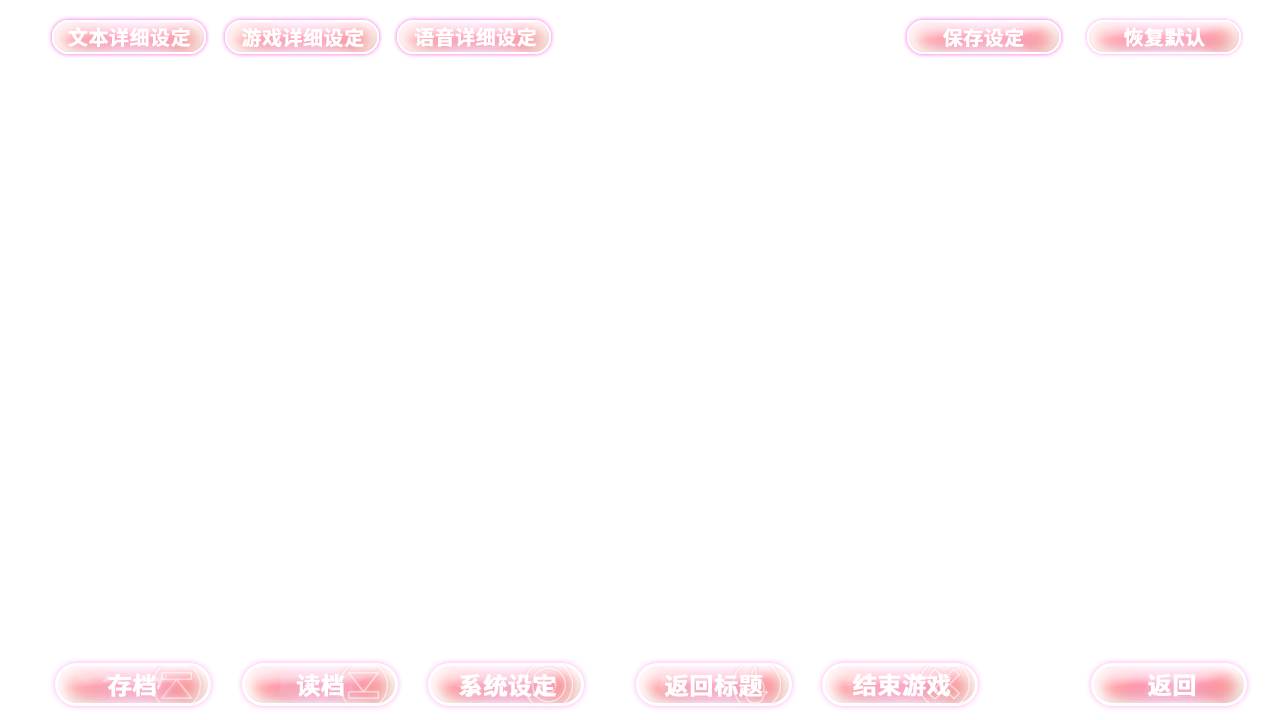
<style>
.page{position:relative;width:1280px;height:720px;background:#ffffff}
.page>*{position:absolute;margin:0}
.t1{font:20px "SourceHanSansSC-Bold";color:#ffffff;font-weight:bold}
.t2{font:24px "SourceHanSansSC-Bold";color:#ffffff;font-weight:bold}
</style>
<div class="page">
<p class="t1" style="left:68px;top:27px;width:123px;height:20px">文本详细设定</p>
<p class="t1" style="left:242px;top:28px;width:122px;height:20px">游戏详细设定</p>
<p class="t1" style="left:414px;top:27px;width:123px;height:20px">语音详细设定</p>
<p class="t1" style="left:943px;top:28px;width:81px;height:20px">保存设定</p>
<p class="t1" style="left:1123px;top:27px;width:82px;height:20px">恢复默认</p>
<p class="t2" style="left:108px;top:673px;width:48px;height:24px">存档</p>
<p class="t2" style="left:296px;top:673px;width:48px;height:24px">读档</p>
<p class="t2" style="left:459px;top:674px;width:98px;height:23px">系统设定</p>
<p class="t2" style="left:664px;top:674px;width:99px;height:23px">返回标题</p>
<p class="t2" style="left:852px;top:673px;width:99px;height:24px">结束游戏</p>
<p class="t2" style="left:1147px;top:673px;width:48px;height:24px">返回</p>
</div>
